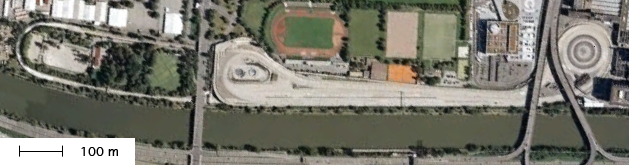
<style>
.page{position:relative;width:629px;height:165px}
.page>*{position:absolute;margin:0}
.t1{font:12px "Geneva";color:#000000}
</style>
<div class="page">
<p class="t1" style="left:81px;top:147px;width:37px;height:9px">100 m</p>
</div>
